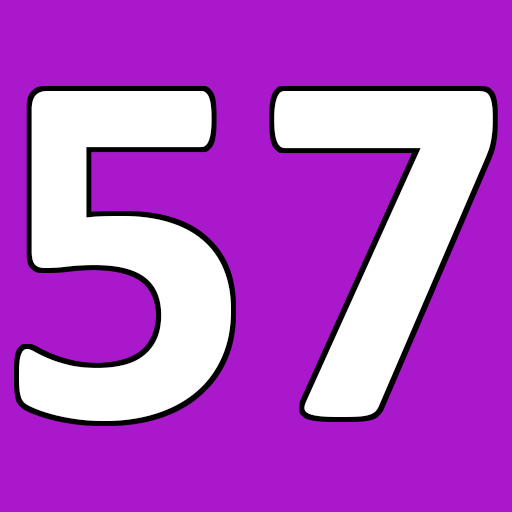
<style>
.page{position:relative;width:512px;height:512px;background:#a918cb}
.page>*{position:absolute;margin:0}
.t1{font:511.5px "Calibri-Bold";color:#ffffff}
</style>
<div class="page">
<p class="t1" style="left:19px;top:91px;width:474px;height:330px">57</p>
</div>
